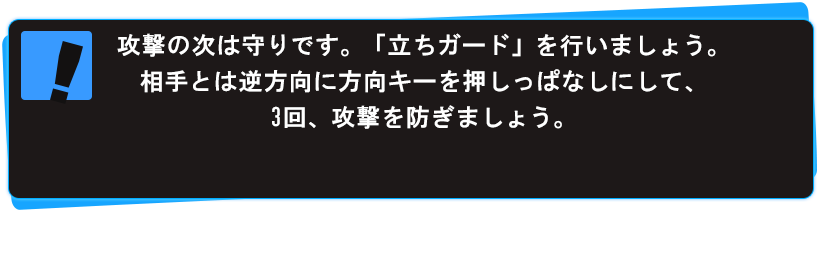
<style>
.page{position:relative;width:820px;height:256px;background:#1d1818}
.page>*{position:absolute;margin:0}
.t1{font:24px/36px "HGGothicE";letter-spacing:0.05em;color:#ffffff}
</style>
<div class="page">
<p class="t1" style="left:117px;top:33px;width:599px;height:96px;text-align:center">攻撃の次は守りです。「立ちガード」を行いましょう。<br>相手とは逆方向に方向キーを押しっぱなしにして、<br>3回、攻撃を防ぎましょう。</p>
</div>
